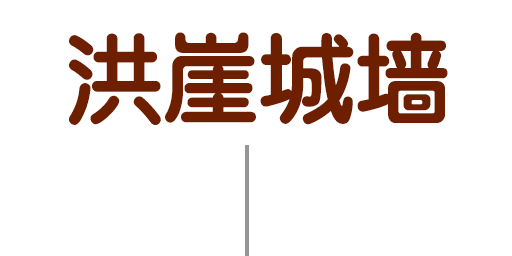
<style>
.page{position:relative;width:512px;height:256px;background:#ffffff}
.page>*{position:absolute;margin:0}
.t1{font:96px "GBYenRound-Heavy";color:#6d1f00}
</style>
<div class="page">
<p class="t1" style="left:69px;top:32px;width:379px;height:93px">洪崖城墙</p>
</div>
